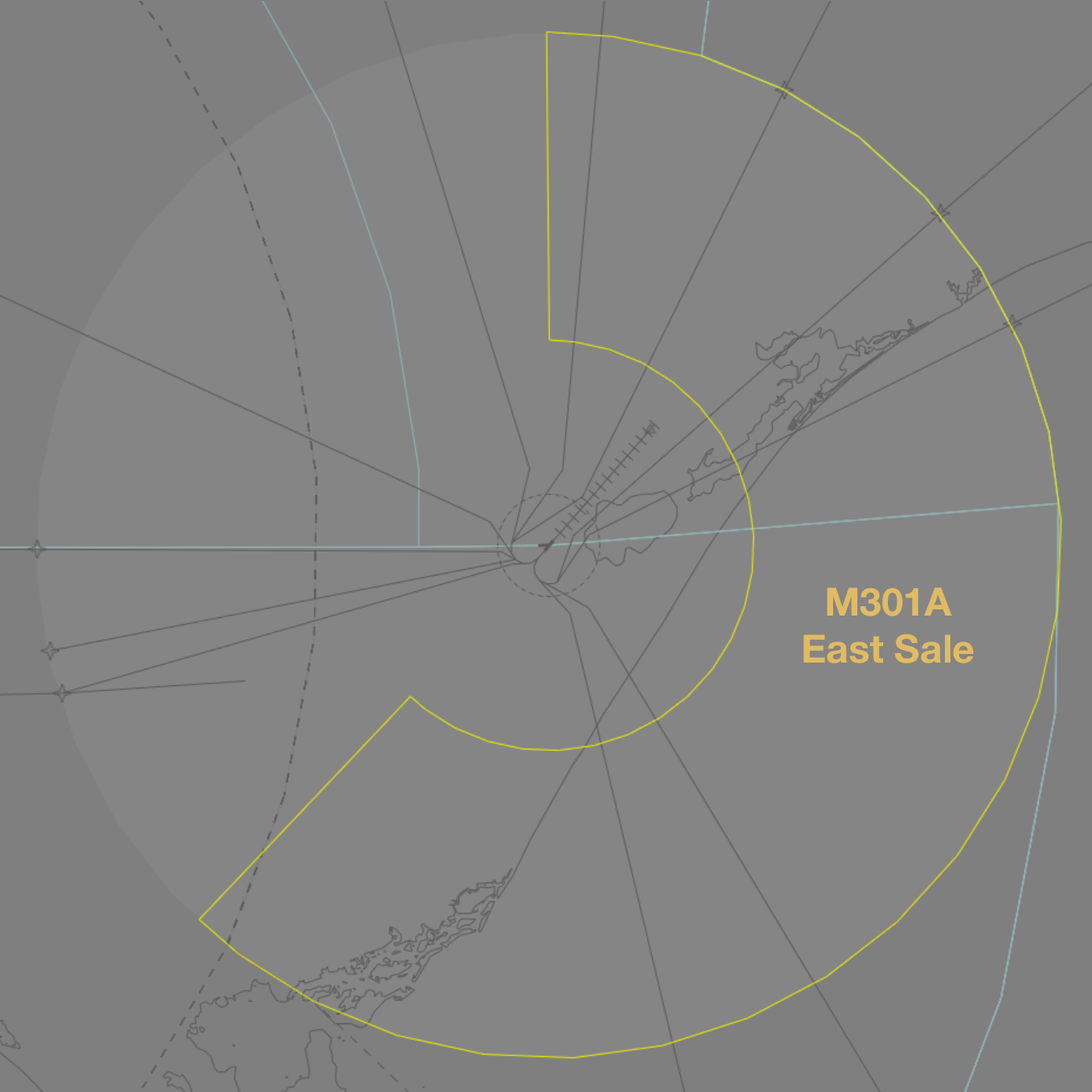
<style>
.page{position:relative;width:1092px;height:1092px;background:#858585}
.page>*{position:absolute;margin:0}
.t1{font:39.1px "HelveticaNeue-Bold";color:#e1bb63}
</style>
<div class="page">
<p class="t1" style="left:803px;top:587px;width:171px;height:76px;text-align:center">M301A<br>East Sale</p>
</div>
